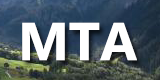
<style>
.page{position:relative;width:160px;height:80px}
.page>*{position:absolute;margin:0}
.t1{font:53.1px "MicrosoftPhagsPa-Bold";color:#ffffff}
</style>
<div class="page">
<p class="t1" style="left:22px;top:22px;width:115px;height:39px">MTA</p>
</div>
